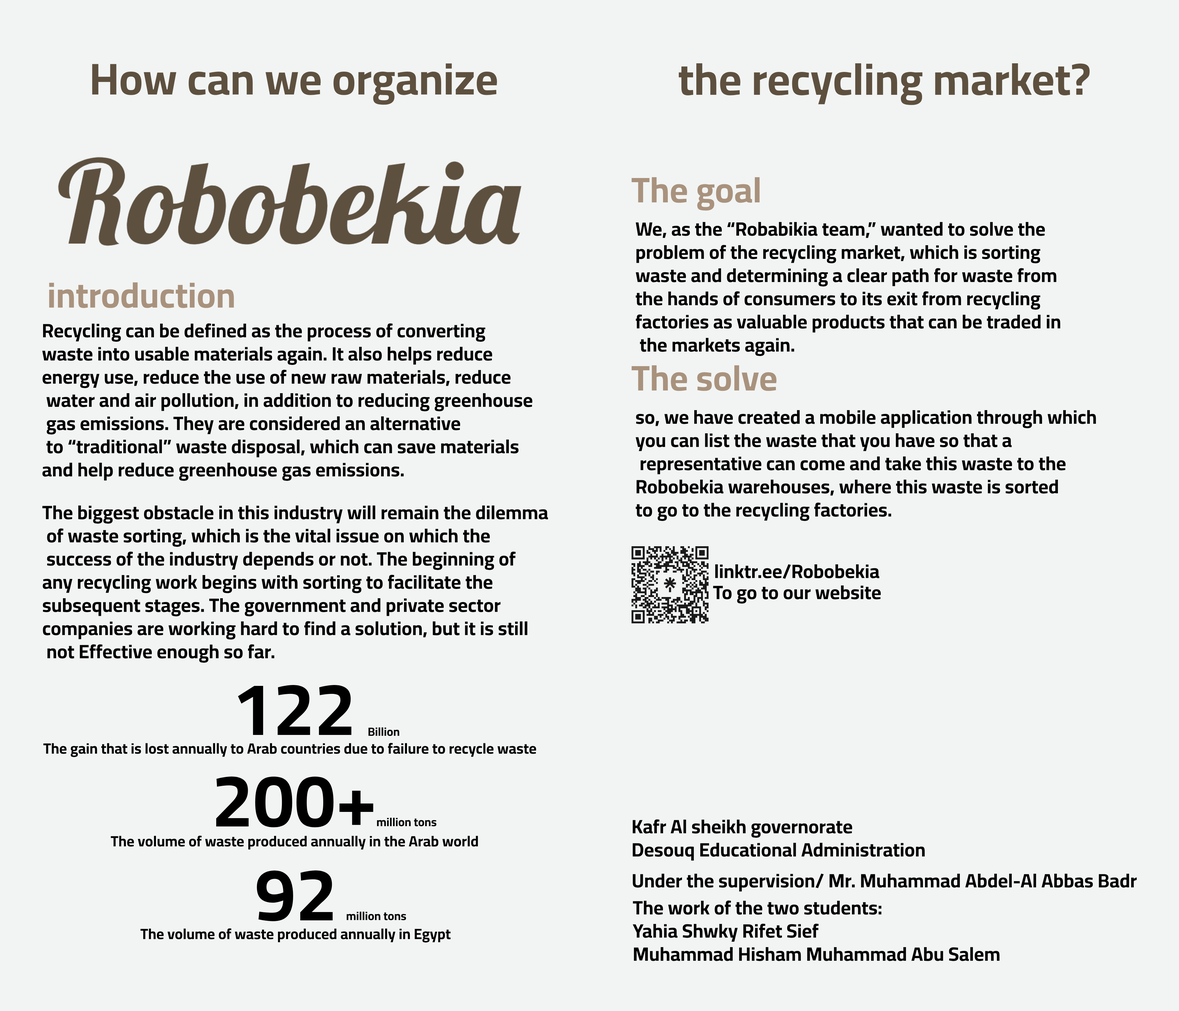
<style>
.page{position:relative;width:1179px;height:1011px;background:#f2f4f3}
.page>*{position:absolute;margin:0}
.t1{font:44.6px "Cairo-Bold";color:#5e503f}
.t2{font:35.7px "Cairo-Bold";color:#a9927d}
.t3{font:19.3px "Cairo-Bold";color:#000000}
.t4{font:74.3px "Cairo-Bold";color:#000000}
.t5{font:11.9px "Cairo-Bold";color:#000000}
.t6{font:14.9px "Cairo-Bold";color:#000000}
</style>
<div class="page">
<p class="t1" style="left:92px;top:63px;width:405px;height:42px">How can we organize</p>
<p class="t1" style="left:679px;top:63px;width:411px;height:42px">the recycling market?</p>
<p class="t2" style="left:632px;top:177px;width:128px;height:34px">The goal</p>
<p class="t3" style="left:636px;top:222px;width:425px;height:134px">We, as the “Robabikia team,” wanted to solve the <br>problem of the recycling market, which is sorting <br>waste and determining a clear path for waste from <br>the hands of consumers to its exit from recycling <br>factories as valuable products that can be traded in<br> the markets again.</p>
<p class="t3" style="left:42px;top:323px;width:491px;height:158px">Recycling can be defined as the process of converting <br>waste into usable materials again. It also helps reduce <br>energy use, reduce the use of new raw materials, reduce<br> water and air pollution, in addition to reducing greenhouse<br> gas emissions. They are considered an alternative<br> to “traditional” waste disposal, which can save materials <br>and help reduce greenhouse gas emissions.</p>
<p class="t2" style="left:632px;top:365px;width:145px;height:26px">The solve</p>
<p class="t3" style="left:636px;top:410px;width:461px;height:111px">so, we have created a mobile application through which<br>you can list the waste that you have so that a<br> representative can come and take this waste to the <br>Robobekia warehouses, where this waste is sorted <br>to go to the recycling factories.</p>
<p class="t3" style="left:42px;top:505px;width:506px;height:158px">The biggest obstacle in this industry will remain the dilemma<br> of waste sorting, which is the vital issue on which the<br> success of the industry depends or not. The beginning of <br>any recycling work begins with sorting to facilitate the <br>subsequent stages. The government and private sector <br>companies are working hard to find a solution, but it is still<br> not Effective enough so far.</p>
<p class="t3" style="left:715px;top:564px;width:165px;height:15px">linktr.ee/Robobekia</p>
<p class="t3" style="left:713px;top:585px;width:168px;height:19px">To go to our website</p>
<p class="t4" style="left:238px;top:685px;width:114px;height:50px">122</p>
<p class="t5" style="left:368px;top:727px;width:31px;height:9px">Billion</p>
<p class="t6" style="left:43px;top:743px;width:493px;height:14px">The gain that is lost annually to Arab countries due to failure to recycle waste</p>
<p class="t4" style="left:216px;top:777px;width:158px;height:50px">200+</p>
<p class="t5" style="left:377px;top:818px;width:60px;height:8px">million tons</p>
<p class="t3" style="left:633px;top:819px;width:292px;height:42px">Kafr Al sheikh governorate<br>Desouq Educational Administration</p>
<p class="t6" style="left:111px;top:836px;width:367px;height:14px">The volume of waste produced annually in the Arab world</p>
<p class="t4" style="left:257px;top:870px;width:76px;height:51px">92</p>
<p class="t3" style="left:633px;top:873px;width:504px;height:19px">Under the supervision/ Mr. Muhammad Abdel-Al Abbas Badr</p>
<p class="t3" style="left:633px;top:900px;width:367px;height:61px">The work of the two students:<br>Yahia Shwky Rifet Sief<br>Muhammad Hisham Muhammad Abu Salem</p>
<p class="t5" style="left:347px;top:911px;width:59px;height:9px">million tons</p>
<p class="t6" style="left:141px;top:928px;width:310px;height:15px">The volume of waste produced annually in Egypt</p>
</div>
